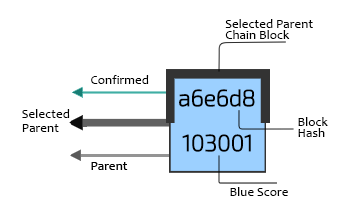
<style>
.page{position:relative;width:351px;height:220px;background:#ffffff}
.page>*{position:absolute;margin:0}
.t1{font:12px/11px "Candara";letter-spacing:0.004em;color:#000000;scale:1.09 1}
.t2{font:12px "Candara";letter-spacing:0.004em;color:#000000;scale:1.09 1}
</style>
<div class="page">
<p class="t1" style="left:225px;top:19px;width:88px;height:20px">Selected Parent<br>Chain Block</p>
<p class="t2" style="left:91px;top:75px;width:58px;height:9px">Confirmed</p>
<p class="t2" style="left:22px;top:109px;width:48px;height:23px">Selected<br>Parent</p>
<p class="t1" style="left:298px;top:117px;width:30px;height:20px">Block<br>Hash</p>
<p class="t2" style="left:230px;top:187px;width:58px;height:9px">Blue Score</p>
</div>
